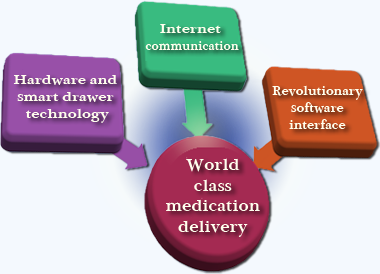
<style>
.page{position:relative;width:380px;height:274px;background:#f4f9fe}
.page>*{position:absolute;margin:0}
.t1{font:14.3px "Plantagenet-bold";color:#ffffee;scale:0.84 1}
.t2{font:14.3px "Plantagenet-bold";color:#ffffee;scale:1.05 1}
.t3{font:14.3px "Plantagenet-bold";color:#ffffee;scale:0.9 1}
.t4{font:17.1px "Plantagenet-bold";color:#ffffee}
</style>
<div class="page">
<p class="t1" style="left:145px;top:24px;width:94px;height:26px;text-align:center"><span class="t2">Internet <br></span>communication</p>
<p class="t2" style="left:13px;top:75px;width:104px;height:48px;text-align:center">Hardware and <br>smart drawer <br>technology</p>
<p class="t3" style="left:272px;top:85px;width:91px;height:44px;text-align:center">Revolutionary<br>software<br>interface</p>
<p class="t4" style="left:166px;top:158px;width:94px;height:79px;text-align:center">World<br>class<br>medication<br>delivery</p>
</div>
